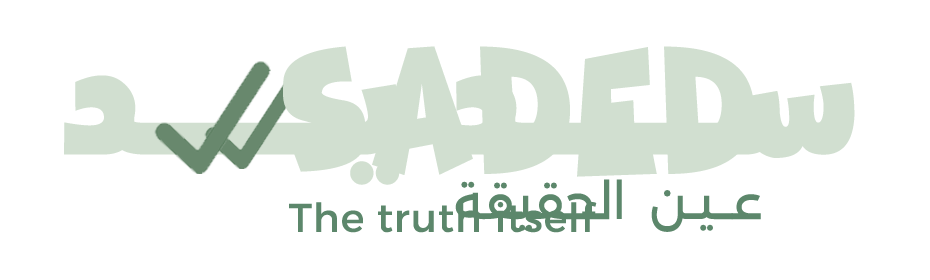
<style>
.page{position:relative;width:930px;height:280px;background:#ffffff}
.page>*{position:absolute;margin:0}
.t1{font:160px "DGBebo-Bold";letter-spacing:0.02em;color:#d1dfd0}
.t2{font:142.7px "DGBebo-Bold";letter-spacing:0.02em;color:#d1dfd0}
.t3{font:48px "Alexandria-Regular";letter-spacing:0.02em;color:#5c876b}
.t4{font:40px "Alexandria-Regular";letter-spacing:0.02em;color:#5c876b}
</style>
<div class="page">
<p class="t1" style="left:283px;top:46px;width:471px;height:131px">SADED</p>
<p class="t2" style="left:64px;top:75px;width:791px;height:110px">ســـــديـــــد</p>
<p class="t3" style="left:455px;top:179px;width:306px;height:53px">عــيـن الحقيقة</p>
<p class="t4" style="left:289px;top:201px;width:308px;height:32px">The truth itself</p>
</div>
